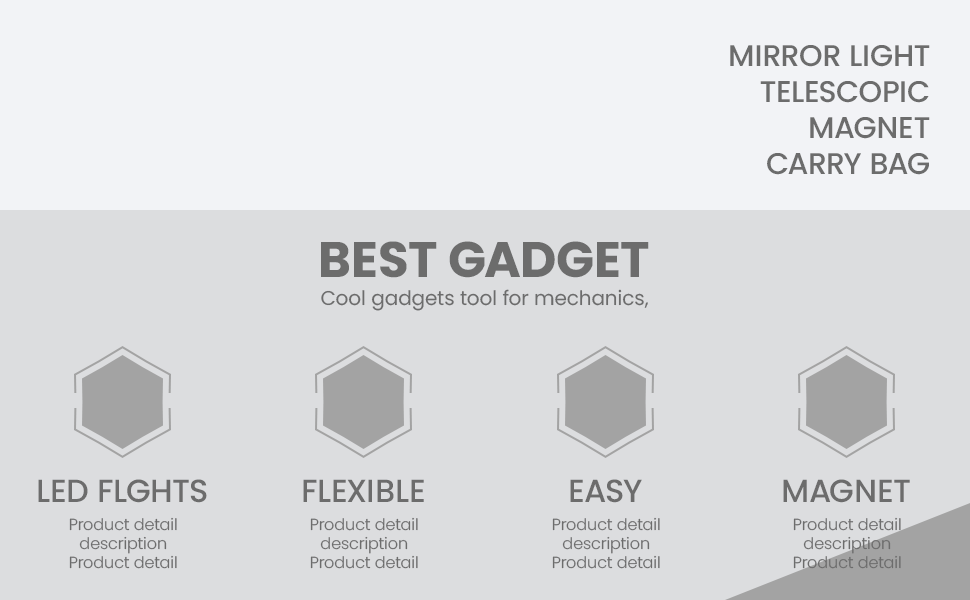
<style>
.page{position:relative;width:970px;height:600px;background:#dcdddf}
.page>*{position:absolute;margin:0}
.t1{font:30px "Poppins-Medium";color:#6c6c6c}
.t2{font:50px "Poppins-Bold";color:#6c6c6c}
.t3{font:20px "Poppins-Regular";color:#6c6c6c}
.t4{font:32px "Poppins-Medium";color:#6c6c6c}
.t5{font:16px "Poppins-Light";color:#6c6c6c}
</style>
<div class="page">
<p class="t1" style="left:730px;top:45px;width:200px;height:130px;text-align:right">MIRROR LIGHT<br>TELESCOPIC<br>MAGNET<br>CARRY BAG</p>
<p class="t2" style="left:321px;top:241px;width:328px;height:37px">BEST GADGET</p>
<p class="t3" style="left:321px;top:289px;width:327px;height:22px">Cool gadgets tool for mechanics,</p>
<p class="t4" style="left:38px;top:479px;width:169px;height:24px">LED FLGHTS</p>
<p class="t4" style="left:303px;top:479px;width:121px;height:23px">FLEXIBLE</p>
<p class="t4" style="left:570px;top:479px;width:72px;height:24px">EASY</p>
<p class="t4" style="left:783px;top:479px;width:127px;height:24px">MAGNET</p>
<p class="t5" style="left:69px;top:517px;width:108px;height:52px;text-align:center">Product detail<br>description<br>Product detail</p>
<p class="t5" style="left:310px;top:517px;width:108px;height:52px;text-align:center">Product detail<br>description<br>Product detail</p>
<p class="t5" style="left:552px;top:517px;width:108px;height:52px;text-align:center">Product detail<br>description<br>Product detail</p>
<p class="t5" style="left:793px;top:517px;width:108px;height:52px;text-align:center">Product detail<br>description<br>Product detail</p>
</div>
